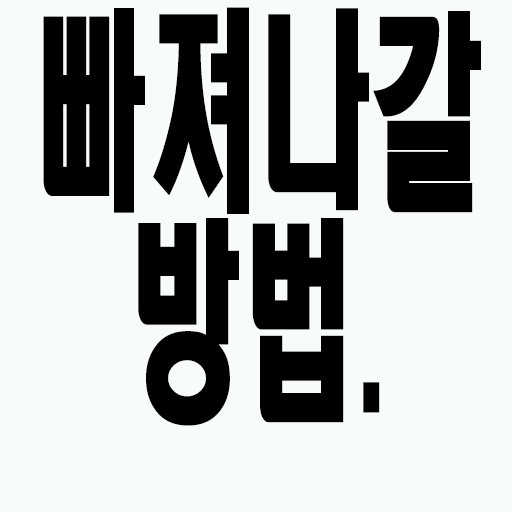
<style>
.page{position:relative;width:512px;height:512px;background:#f8fcf8}
.page>*{position:absolute;margin:0}
.t1{font:212.8px/210px "HeadlineR-HM";color:#000000;scale:0.53 1}
</style>
<div class="page">
<p class="t1" style="left:43px;top:7px;width:438px;height:419px;text-align:center">빠져나갈<br>방법.</p>
</div>
